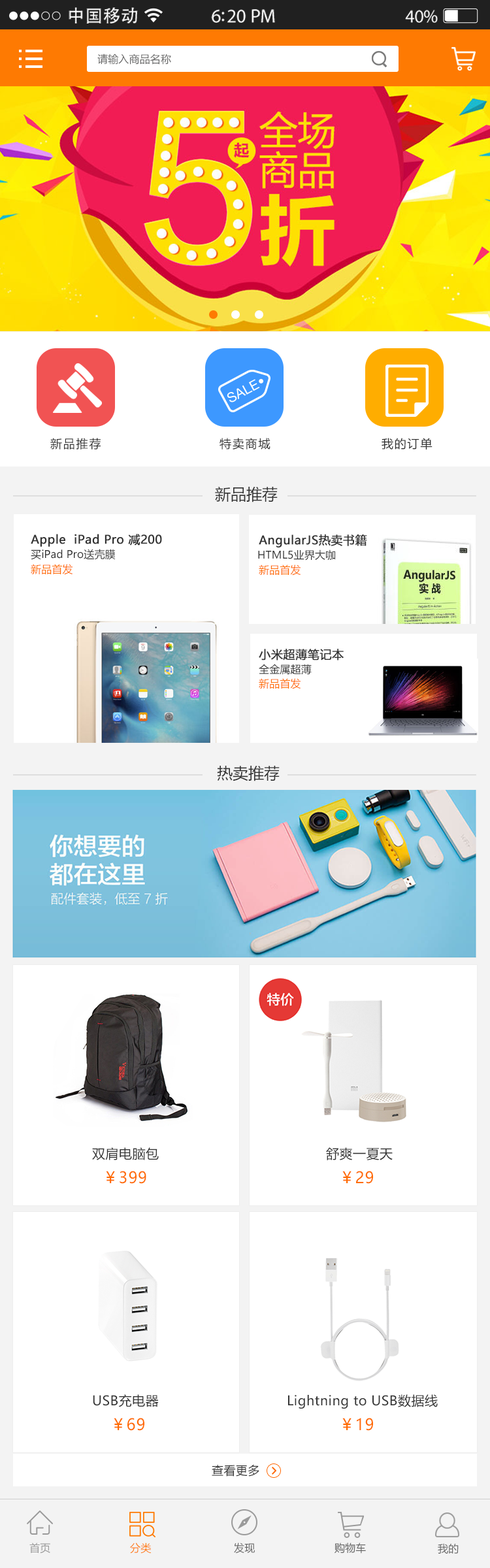
<style>
.page{position:relative;width:490px;height:1568px;background:#ffffff}
.page>*{position:absolute;margin:0}
.t1{font:17.7px "AdobeHeitiStd-Regular";letter-spacing:0.02em;color:#ffffff}
.t2{font:19.2px "MyriadPro-Regular";letter-spacing:-0.02em;color:#ffffff}
.t3{font:18.4px "MyriadPro-Regular";letter-spacing:-0.02em;color:#ffffff}
.t4{font:10.5px "MicrosoftYaHei";letter-spacing:0.01em;color:#666666}
.t5{font:11.8px "MicrosoftYaHei";letter-spacing:0.1em;color:#333333}
.t6{font:15.7px "MicrosoftYaHei";color:#333333}
.t7{font:11.8px "MicrosoftYaHei";letter-spacing:0.01em;color:#333333;font-weight:bold}
.t8{font:10.5px "MicrosoftYaHei";letter-spacing:0.01em;color:#333333}
.t9{font:10.5px "MicrosoftYaHei";letter-spacing:0.01em;color:#ff6b00}
.t10{font:13.1px "MicrosoftYaHei";letter-spacing:0.025em;color:#333333}
.t11{font:15.7px "MicrosoftYaHei";letter-spacing:0.025em;color:#ff6b00}
.t12{font:11.8px "MicrosoftYaHei";letter-spacing:0.025em;color:#333333}
.t13{font:10.5px "MicrosoftYaHei";letter-spacing:0.01em;color:#9a9a9a}
.t14{font:10.5px "MicrosoftYaHei";letter-spacing:0.01em;color:#fe7a02}
</style>
<div class="page">
<p class="t1" style="left:69px;top:7px;width:69px;height:17px">中国移动</p>
<p class="t2" style="left:211px;top:9px;width:64px;height:14px">6:20 PM</p>
<p class="t3" style="left:405px;top:10px;width:33px;height:13px">40%</p>
<p class="t4" style="left:97px;top:54px;width:74px;height:11px">请输入商品名称</p>
<p class="t5" style="left:50px;top:438px;width:51px;height:11px">新品推荐</p>
<p class="t5" style="left:220px;top:438px;width:50px;height:11px">特卖商城</p>
<p class="t5" style="left:382px;top:438px;width:51px;height:11px">我的订单</p>
<p class="t6" style="left:215px;top:487px;width:63px;height:15px">新品推荐</p>
<p class="t7" style="left:31px;top:534px;width:131px;height:13px">Apple  iPad Pro 减200</p>
<p class="t7" style="left:259px;top:534px;width:108px;height:13px">AngularJS热卖书籍</p>
<p class="t8" style="left:31px;top:549px;width:85px;height:11px">买iPad Pro送壳膜</p>
<p class="t8" style="left:258px;top:549px;width:77px;height:12px">HTML5业界大咖</p>
<p class="t9" style="left:31px;top:564px;width:42px;height:11px">新品首发</p>
<p class="t9" style="left:259px;top:564px;width:42px;height:12px">新品首发</p>
<p class="t7" style="left:259px;top:649px;width:85px;height:12px">小米超薄笔记本</p>
<p class="t8" style="left:259px;top:664px;width:53px;height:11px">全金属超薄</p>
<p class="t9" style="left:259px;top:678px;width:42px;height:11px">新品首发</p>
<p class="t6" style="left:217px;top:766px;width:63px;height:15px">热卖推荐</p>
<p class="t10" style="left:92px;top:1147px;width:67px;height:13px">双肩电脑包</p>
<p class="t10" style="left:326px;top:1147px;width:67px;height:13px">舒爽一夏天</p>
<p class="t11" style="left:106px;top:1171px;width:40px;height:13px">￥399</p>
<p class="t11" style="left:342px;top:1171px;width:31px;height:13px">￥29</p>
<p class="t10" style="left:93px;top:1394px;width:66px;height:13px">USB充电器</p>
<p class="t10" style="left:288px;top:1394px;width:150px;height:15px">Lightning to USB数据线</p>
<p class="t11" style="left:114px;top:1418px;width:30px;height:13px">￥69</p>
<p class="t11" style="left:342px;top:1418px;width:31px;height:13px">￥19</p>
<p class="t12" style="left:212px;top:1465px;width:47px;height:12px">查看更多</p>
<p class="t13" style="left:29px;top:1543px;width:21px;height:11px">首页</p>
<p class="t14" style="left:130px;top:1543px;width:22px;height:11px">分类</p>
<p class="t4" style="left:234px;top:1543px;width:21px;height:11px">发现</p>
<p class="t4" style="left:335px;top:1543px;width:31px;height:11px">购物车</p>
<p class="t4" style="left:438px;top:1543px;width:21px;height:11px">我的</p>
</div>
